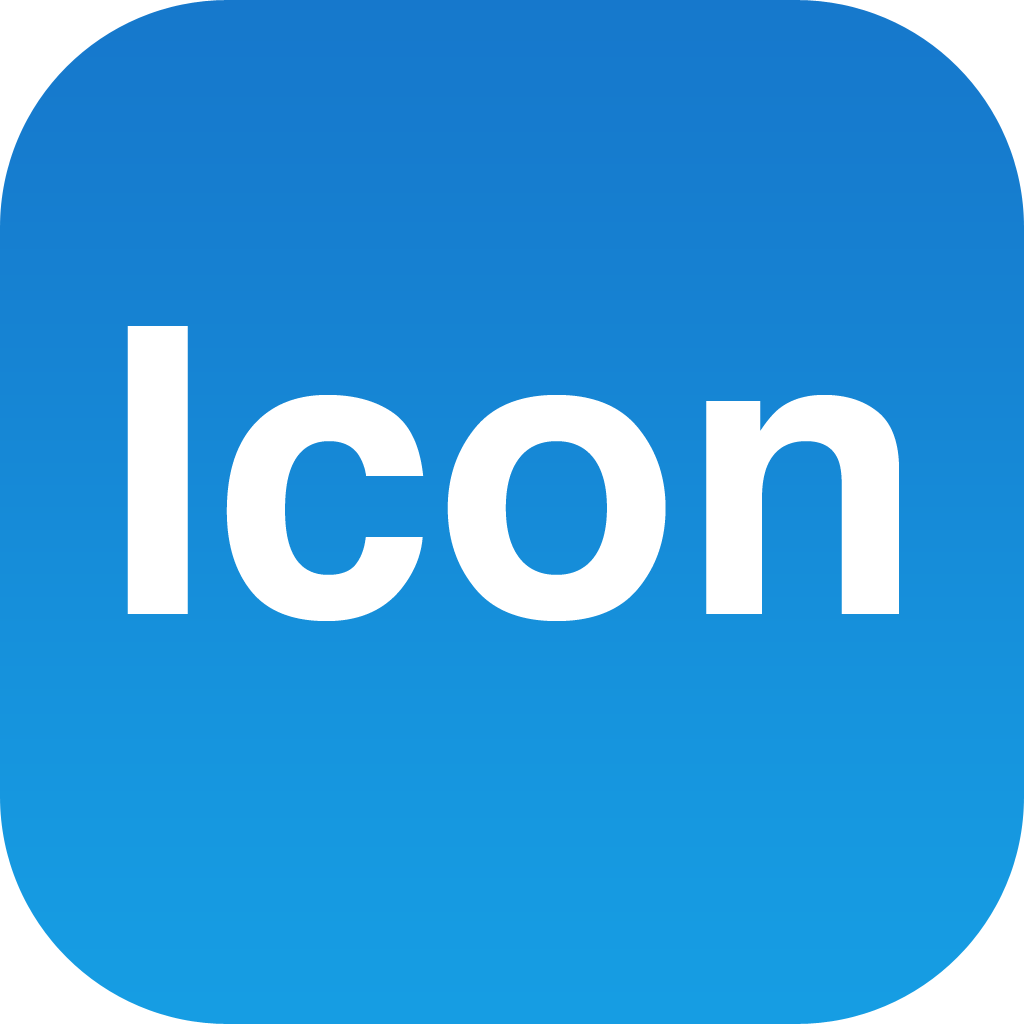
<style>
.page{position:relative;width:1024px;height:1024px}
.page>*{position:absolute;margin:0}
.t1{font:400px "Helvetica-Bold";color:#ffffff}
</style>
<div class="page">
<p class="t1" style="left:127px;top:326px;width:772px;height:295px">Icon</p>
</div>
